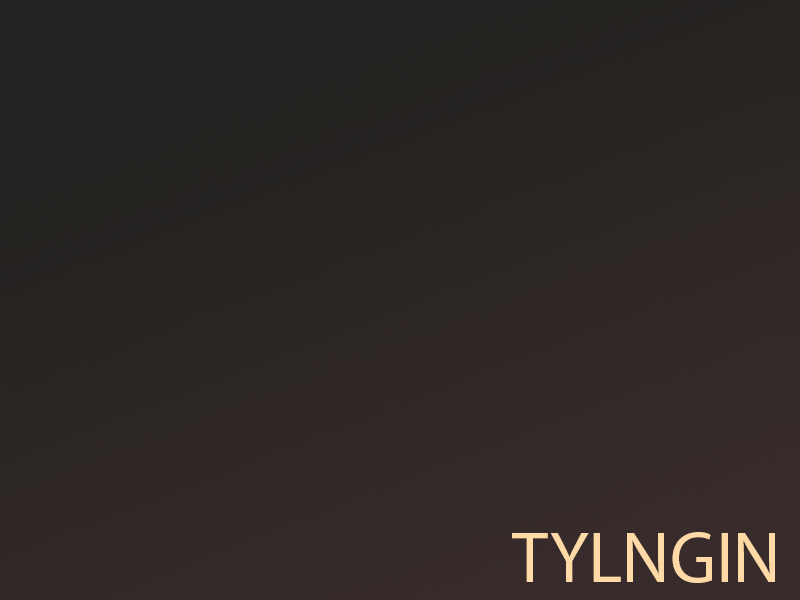
<style>
.page{position:relative;width:800px;height:600px}
.page>*{position:absolute;margin:0}
.t1{font:72px "MyriadPro-Regular";color:#ffd9a6}
</style>
<div class="page">
<p class="t1" style="left:512px;top:532px;width:263px;height:51px">TYLNGIN</p>
</div>
